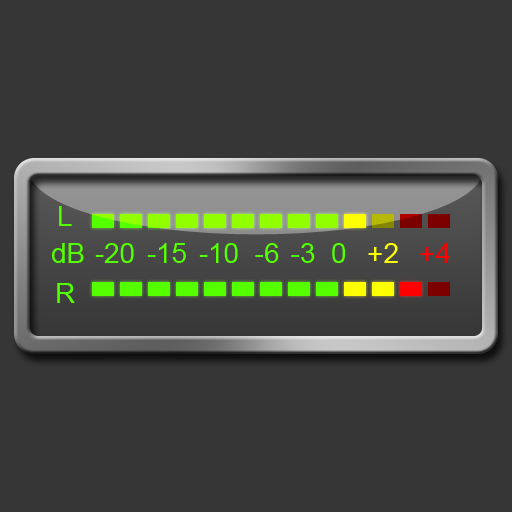
<style>
.page{position:relative;width:512px;height:512px;background:#363636}
.page>*{position:absolute;margin:0}
.t1{font:28px "ArialMT";color:#54ff00}
.t2{font:28px "ArialMT";color:#fcff00}
.t3{font:28px "ArialMT";color:#ff0000}
</style>
<div class="page">
<p class="t1" style="left:59px;top:206px;width:13px;height:20px">L</p>
<p class="t1" style="left:52px;top:243px;width:32px;height:20px">dB</p>
<p class="t1" style="left:95px;top:243px;width:39px;height:20px">-20</p>
<p class="t1" style="left:147px;top:243px;width:39px;height:20px">-15</p>
<p class="t1" style="left:199px;top:243px;width:39px;height:20px">-10</p>
<p class="t1" style="left:255px;top:243px;width:24px;height:20px">-6</p>
<p class="t1" style="left:291px;top:243px;width:24px;height:20px">-3</p>
<p class="t1" style="left:332px;top:243px;width:14px;height:20px">0</p>
<p class="t2" style="left:368px;top:243px;width:30px;height:20px">+2</p>
<p class="t3" style="left:420px;top:243px;width:30px;height:20px">+4</p>
<p class="t1" style="left:57px;top:283px;width:18px;height:20px">R</p>
</div>
